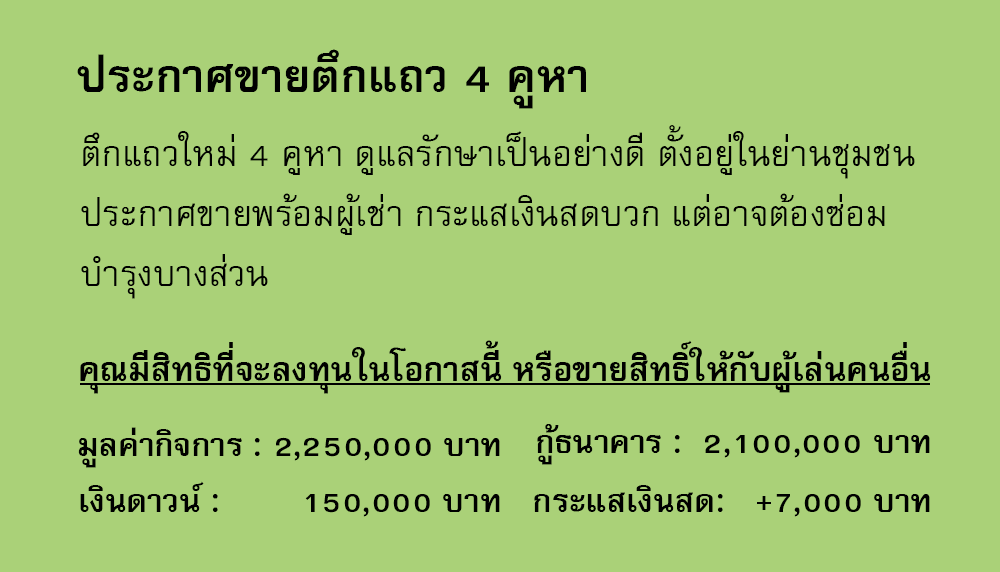
<style>
.page{position:relative;width:1000px;height:572px;background:#aad178}
.page>*{position:absolute;margin:0}
.t1{font:64px "FreesiaUPCBold";color:#000000}
.t2{font:50px/60px "FreesiaUPC";color:#000000}
.t3{font:47px "FreesiaUPCBold";color:#000000}
.t4{font:45px "FreesiaUPCBold";color:#000000}
</style>
<div class="page">
<p class="t1" style="left:77px;top:49px;width:509px;height:60px">ประกาศขายตึกแถว 4 คูหา</p>
<p class="t2" style="left:81px;top:125px;width:834px;height:174px">ตึกแถวใหม่ 4 คูหา ดูแลรักษาเป็นอย่างดี ตั้งอยู่ในย่านชุมชน<br>ประกาศขายพร้อมผู้เช่า กระแสเงินสดบวก แต่อาจต้องซ่อม<br>บำรุงบางส่วน</p>
<p class="t3" style="left:80px;top:340px;width:851px;height:54px">คุณมีสิทธิที่จะลงทุนในโอกาสนี้ หรือขายสิทธิ์ให้กับผู้เล่นคนอื่น</p>
<p class="t4" style="left:537px;top:424px;width:393px;height:41px">กู้ธนาคาร :  2,100,000 บาท</p>
<p class="t4" style="left:78px;top:427px;width:422px;height:41px">มูลค่ากิจการ : 2,250,000 บาท</p>
<p class="t4" style="left:80px;top:481px;width:420px;height:36px">เงินดาวน์ :        150,000 บาท</p>
<p class="t4" style="left:534px;top:485px;width:396px;height:32px">กระแสเงินสด:   +7,000 บาท</p>
</div>
